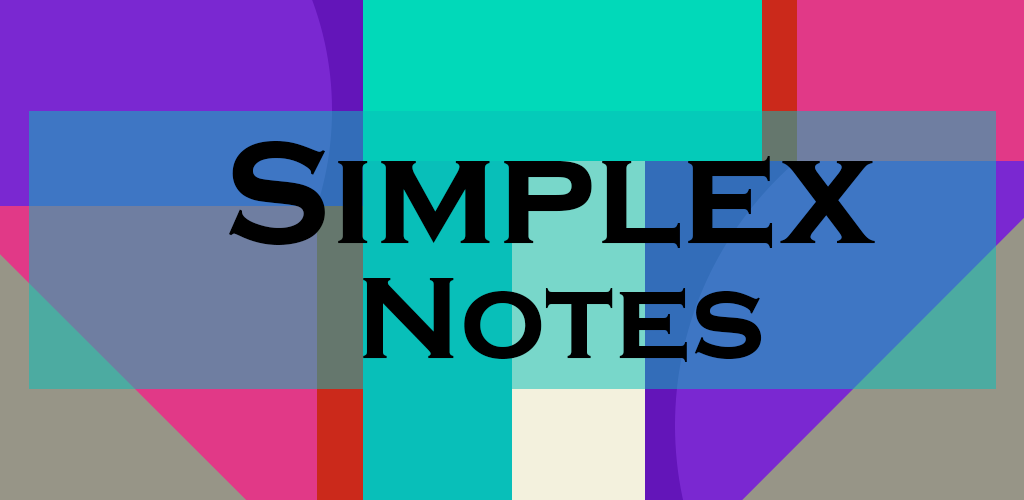
<style>
.page{position:relative;width:1024px;height:500px}
.page>*{position:absolute;margin:0}
.t1{font:150px "CopperplateGothic-Bold";color:#000000}
.t2{font:120px "CopperplateGothic-Bold";color:#000000}
</style>
<div class="page">
<p class="t1" style="left:228px;top:141px;width:647px;height:107px">Simplex</p>
<p class="t2" style="left:363px;top:278px;width:399px;height:84px">Notes</p>
</div>
